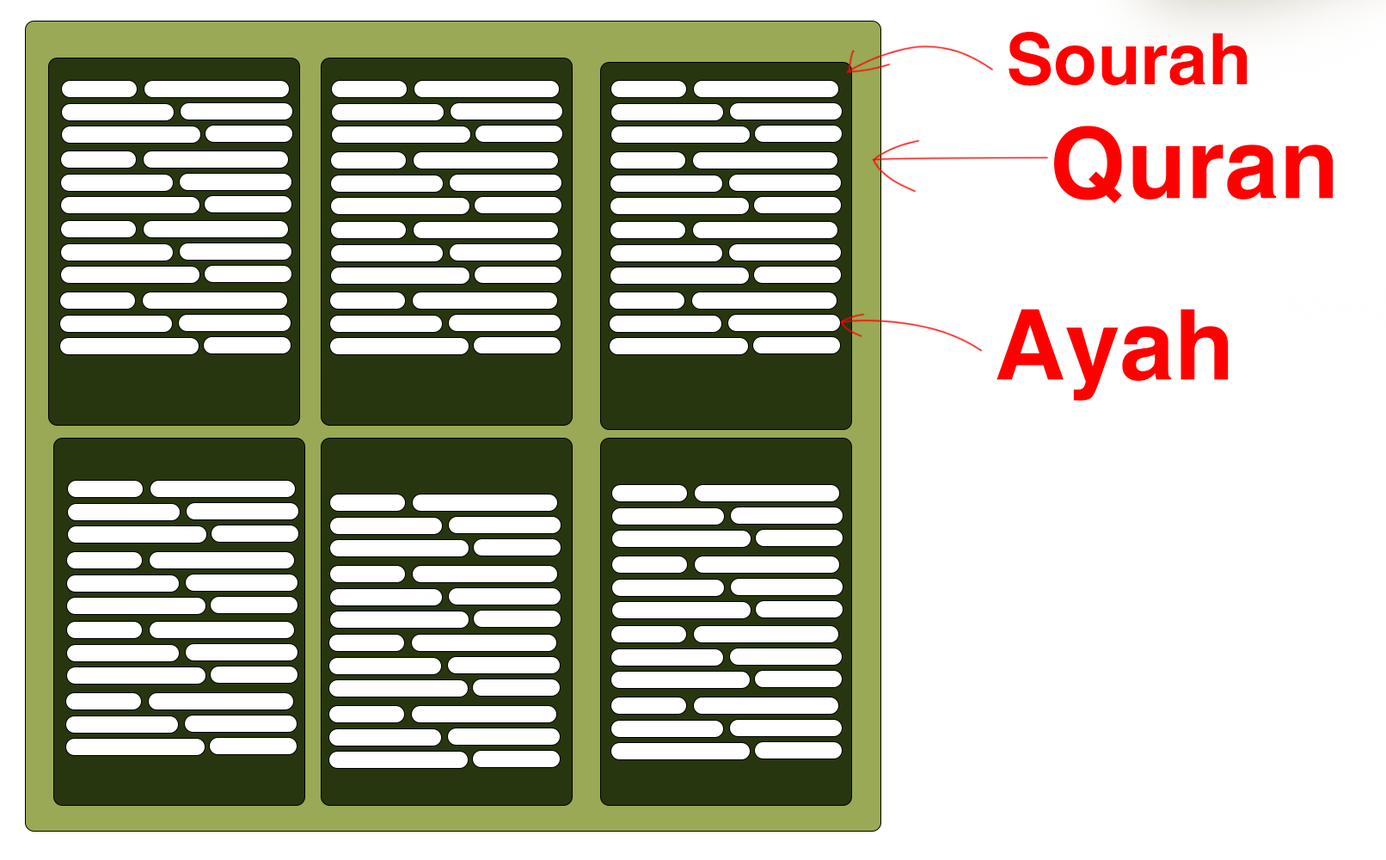
<style>
.page{position:relative;width:1386px;height:860px;background:#ffffff}
.page>*{position:absolute;margin:0}
.t1{font:82px "HacenMaghreb";color:#ff0000}
.t2{font:112.8px "HacenMaghreb";color:#ff0000}
</style>
<div class="page">
<p class="t1" style="left:1009px;top:32px;width:239px;height:54px">Sourah</p>
<p class="t2" style="left:1054px;top:126px;width:280px;height:78px">Quran</p>
<p class="t2" style="left:997px;top:309px;width:232px;height:92px">Ayah</p>
</div>
